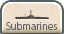
<style>
.page{position:relative;width:64px;height:34px}
.page>*{position:absolute;margin:0}
.t1{font:10px "UDShinGoPro-Light";color:#6a6560;scale:0.9 1}
</style>
<div class="page">
<p class="t1" style="left:6px;top:21px;width:52px;height:9px">Submarines</p>
</div>
